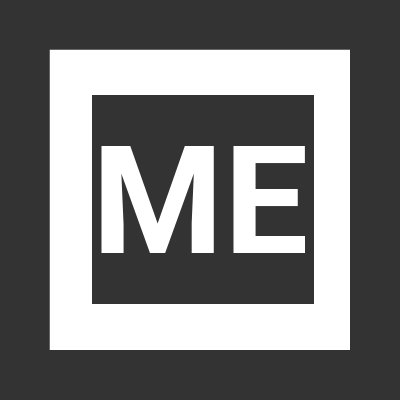
<style>
.page{position:relative;width:400px;height:400px;background:#333333}
.page>*{position:absolute;margin:0}
.t1{font:150px "Roboto-Bold";color:#ffffff}
</style>
<div class="page">
<p class="t1" style="left:101px;top:146px;width:204px;height:107px">ME</p>
</div>
